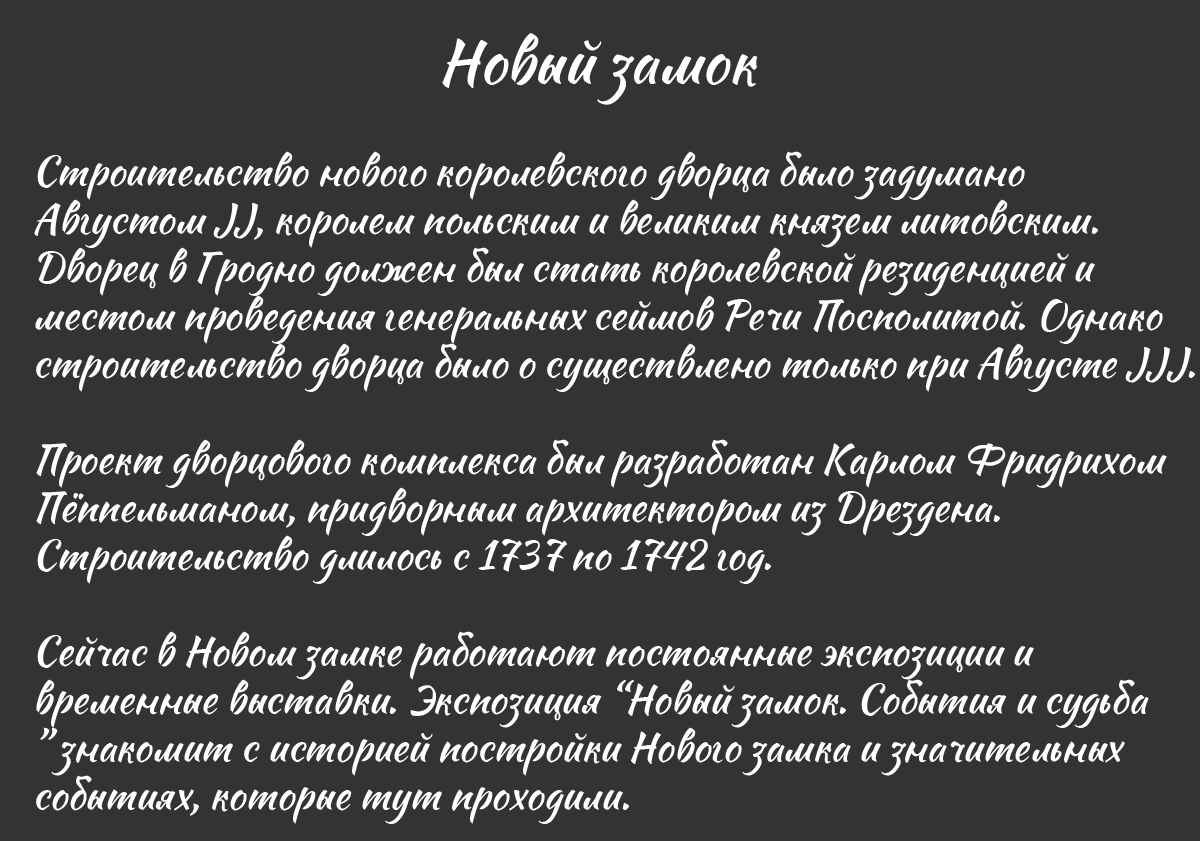
<style>
.page{position:relative;width:1200px;height:841px;background:#333333}
.page>*{position:absolute;margin:0}
.t1{font:60px "Sweet-Mavka-Script";color:#ffffff}
.t2{font:40px "Sweet-Mavka-Script";color:#ffffff}
</style>
<div class="page">
<p class="t1" style="left:442px;top:33px;width:316px;height:72px">Новый замок</p>
<p class="t2" style="left:34px;top:151px;width:1162px;height:673px">Строительство нового королевского дворца было задумано <br>Августом ІІ, королем польским и великим князем литовским. <br>Дворец в Гродно должен был стать королевской резиденцией и <br>местом проведения генеральных сеймов Речи Посполитой. Однако <br>строительство дворца было о существлено только при Августе ІІІ.<br><br>Проект дворцового комплекса был разработан Карлом Фридрихом <br>Пёппельманом, придворным архитектором из Дрездена. <br>Строительство длилось с 1737 по 1742 год.<br><br>Сейчас в Новом замке работают постоянные экспозиции и <br>временные выставки. Экспозиция “Новый замок. События и судьба<br>” знакомит с историей постройки Нового замка и значительных <br>событиях, которые тут проходили.</p>
</div>
